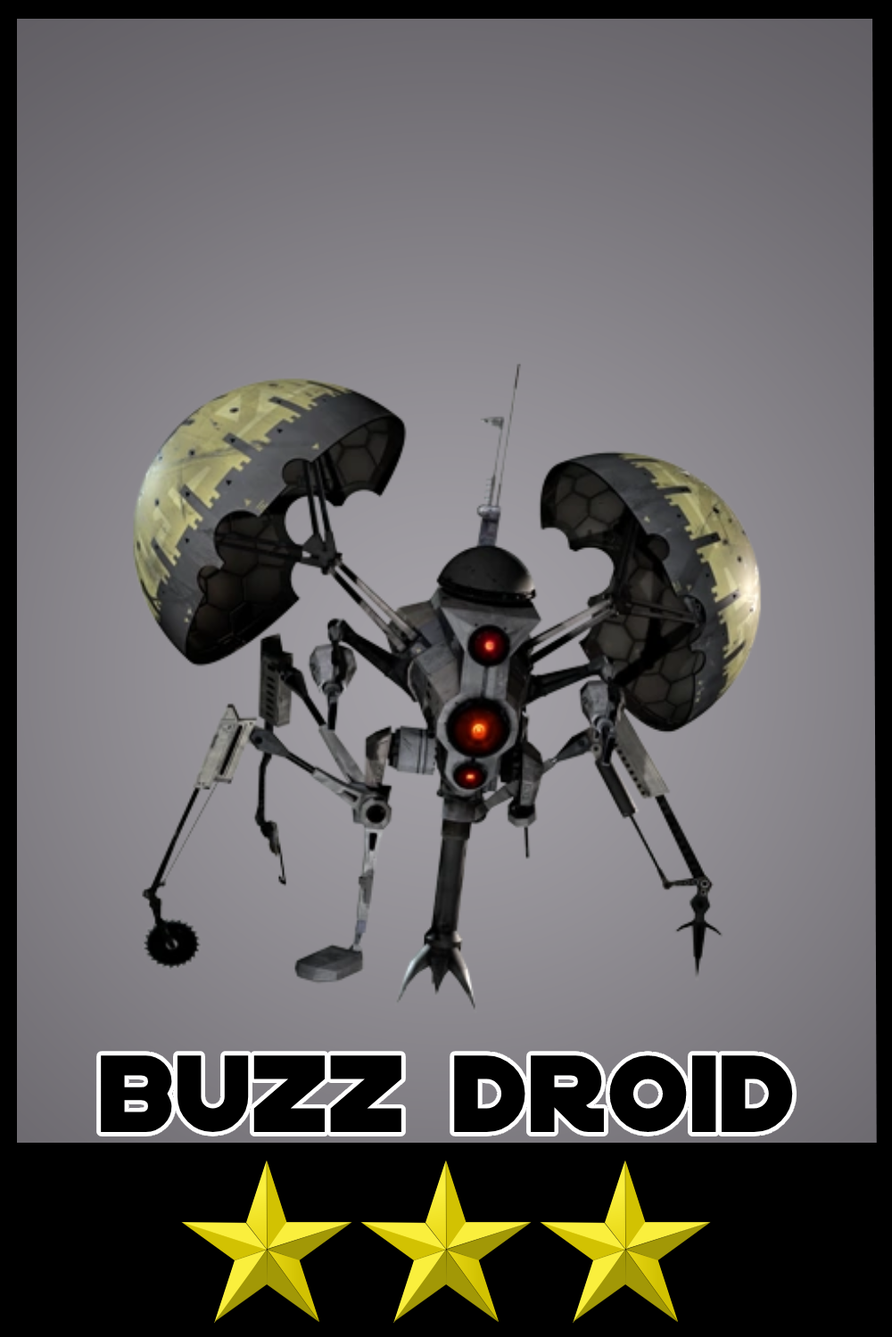
<style>
.page{position:relative;width:892px;height:1337px}
.page>*{position:absolute;margin:0}
.t1{font:117.7px "DistantGalaxy";color:#000000}
</style>
<div class="page">
<p class="t1" style="left:101px;top:1056px;width:692px;height:76px">buzz droid</p>
</div>
